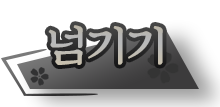
<style>
.page{position:relative;width:220px;height:107px;background:#ffffff}
.page>*{position:absolute;margin:0}
.t1{font:44.8px "SDKukdetopokki-aLt";letter-spacing:-0.04em;color:#b9b9b5}
</style>
<div class="page">
<p class="t1" style="left:48px;top:25px;width:115px;height:40px">넘기기</p>
</div>
